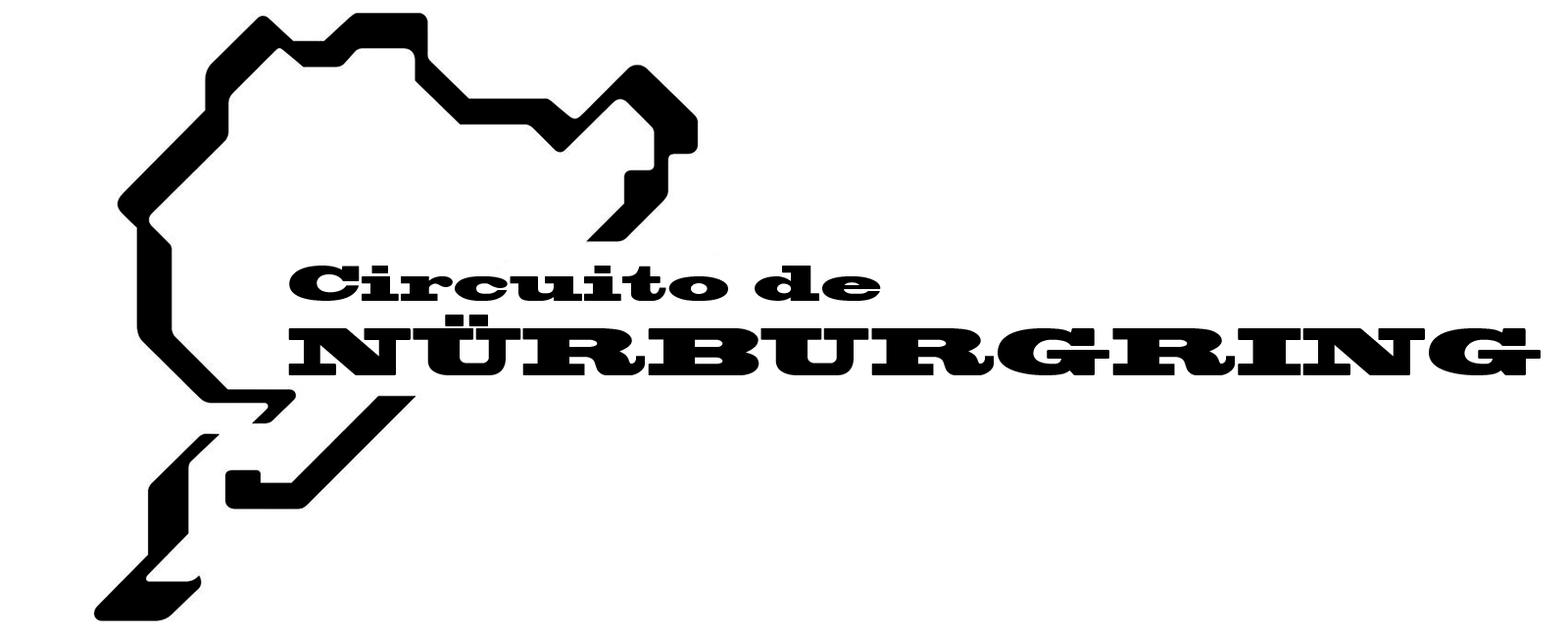
<style>
.page{position:relative;width:1568px;height:634px;background:#ffffff}
.page>*{position:absolute;margin:0}
.t1{font:46.6px "BlackoakStd";color:#000000}
.t2{font:62.1px "BlackoakStd";color:#000000}
</style>
<div class="page">
<p class="t1" style="left:288px;top:266px;width:1253px;height:109px">Circuito de<br><span class="t2">NÜRBURGRING</span></p>
</div>
